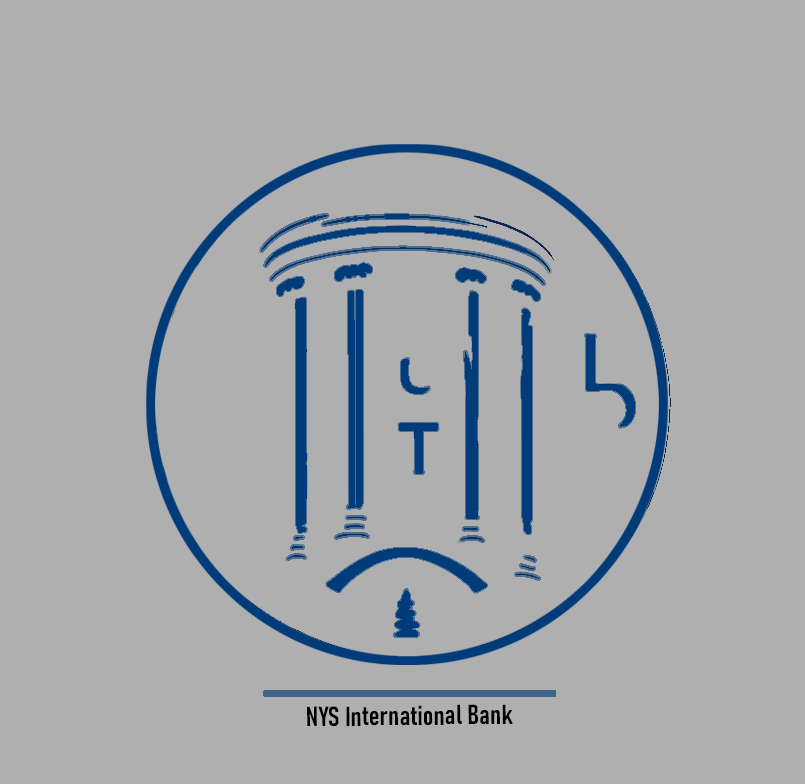
<style>
.page{position:relative;width:805px;height:784px;background:#afafaf}
.page>*{position:absolute;margin:0}
.t1{font:27.2px "Bahnschrift-SemiBoldCondensed";color:#000000}
</style>
<div class="page">
<p class="t1" style="left:307px;top:704px;width:206px;height:23px;rotate:-1deg">NYS International Bank</p>
</div>
